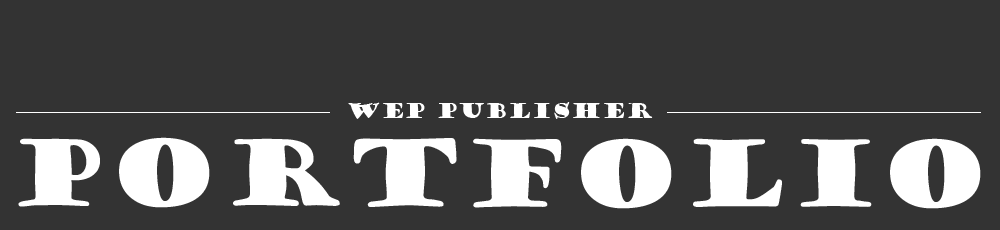
<style>
.page{position:relative;width:1000px;height:230px;background:#333333}
.page>*{position:absolute;margin:0}
.t1{font:20px "GoudyStout";color:#ffffff}
.t2{font:90px "GoudyStout";color:#ffffff}
</style>
<div class="page">
<p class="t1" style="left:348px;top:102px;width:305px;height:17px">Wep publisher</p>
<p class="t2" style="left:18px;top:137px;width:963px;height:72px">Portfolio</p>
</div>
